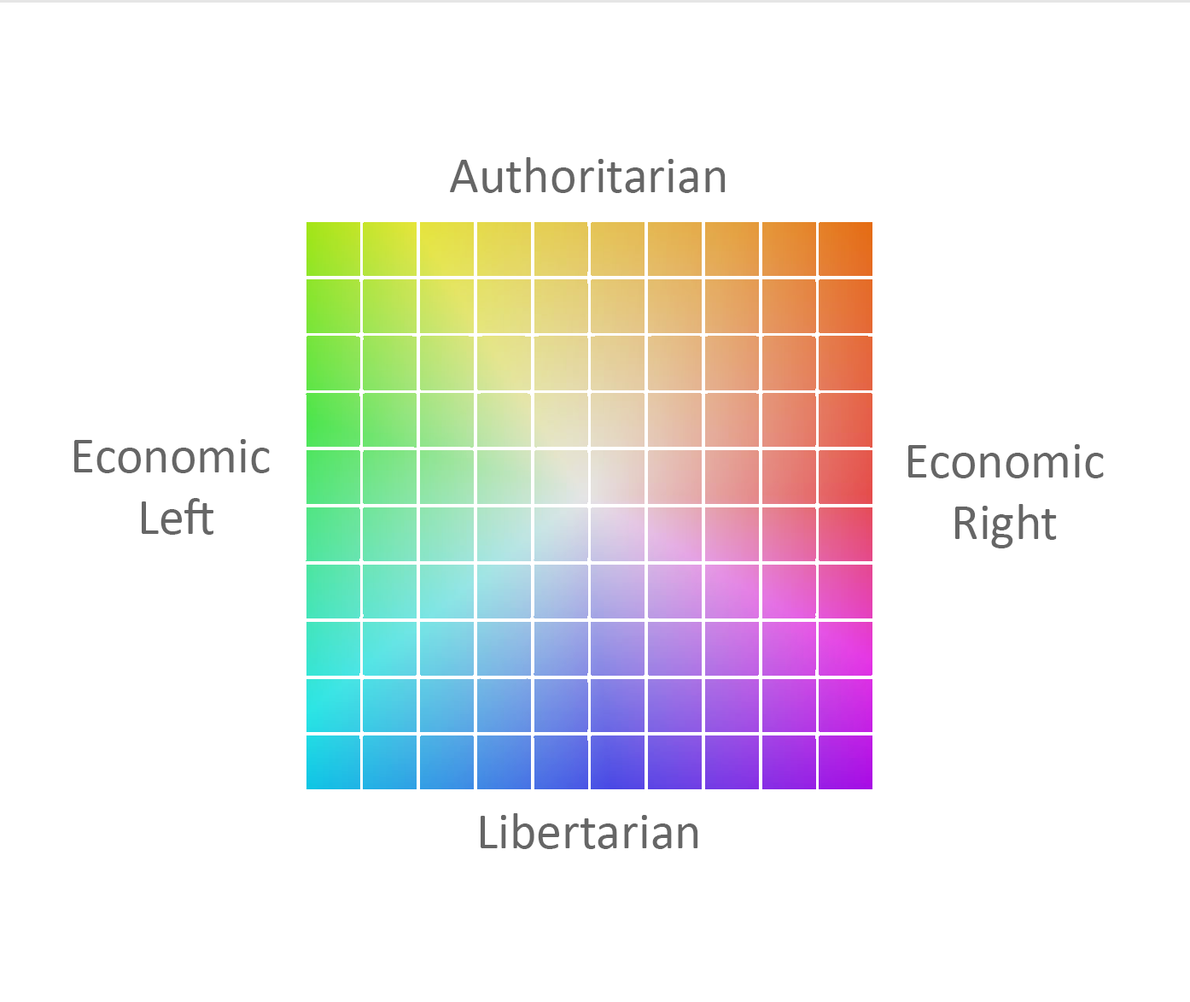
<style>
.page{position:relative;width:1190px;height:1002px;background:#ffffff}
.page>*{position:absolute;margin:0}
.t1{font:51.2px "Calibri";color:#666666}
</style>
<div class="page">
<p class="t1" style="left:450px;top:157px;width:276px;height:36px">Authoritarian</p>
<p class="t1" style="left:74px;top:439px;width:196px;height:96px;text-align:center">Economic<br> Left</p>
<p class="t1" style="left:909px;top:444px;width:195px;height:104px;text-align:center">Economic<br>Right</p>
<p class="t1" style="left:481px;top:813px;width:218px;height:36px">Libertarian</p>
</div>
